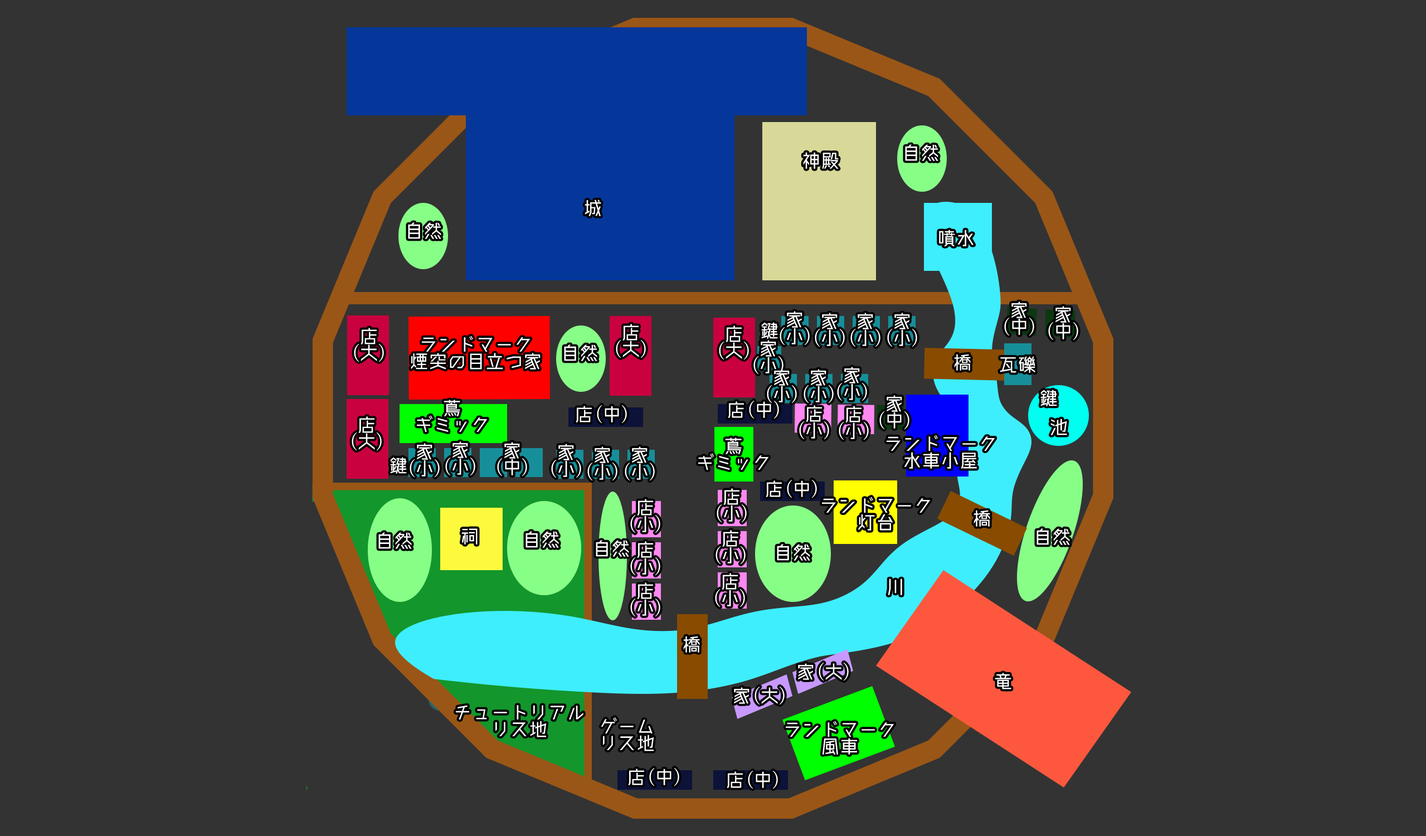
<style>
.page{position:relative;width:1426px;height:836px;background:#333333}
.page>*{position:absolute;margin:0}
.t1{font:19px "Makinas-4-Flat";color:#ffffff}
.t2{font:19px/16.7px "Makinas-4-Flat";color:#ffffff}
</style>
<div class="page">
<p class="t1" style="left:905px;top:144px;width:34px;height:17px">自然</p>
<p class="t1" style="left:803px;top:152px;width:36px;height:17px">神殿</p>
<p class="t1" style="left:585px;top:200px;width:16px;height:16px">城</p>
<p class="t1" style="left:408px;top:222px;width:33px;height:17px">自然</p>
<p class="t1" style="left:939px;top:230px;width:35px;height:16px">噴水</p>
<p class="t2" style="left:1004px;top:302px;width:30px;height:34px;text-align:center">家<br>(中)</p>
<p class="t2" style="left:1048px;top:306px;width:30px;height:35px;text-align:center">家<br>(中)</p>
<p class="t2" style="left:780px;top:311px;width:30px;height:35px;text-align:center">家<br>(小)</p>
<p class="t2" style="left:815px;top:313px;width:30px;height:34px;text-align:center">家<br>(小)</p>
<p class="t2" style="left:851px;top:313px;width:30px;height:34px;text-align:center">家<br>(小)</p>
<p class="t2" style="left:887px;top:313px;width:30px;height:34px;text-align:center">家<br>(小)</p>
<p class="t2" style="left:354px;top:328px;width:30px;height:34px;text-align:center">店<br>(大)</p>
<p class="t2" style="left:616px;top:324px;width:30px;height:34px;text-align:center">店<br>(大)</p>
<p class="t2" style="left:719px;top:325px;width:30px;height:35px;text-align:center">店<br>(大)</p>
<p class="t1" style="left:761px;top:322px;width:17px;height:17px">鍵</p>
<p class="t2" style="left:411px;top:336px;width:130px;height:34px;text-align:center">ランドマーク<br>煙突の目立つ家</p>
<p class="t2" style="left:754px;top:340px;width:30px;height:35px;text-align:center">家<br>(小)</p>
<p class="t1" style="left:564px;top:344px;width:33px;height:17px">自然</p>
<p class="t1" style="left:954px;top:354px;width:17px;height:17px">橋</p>
<p class="t1" style="left:1000px;top:356px;width:36px;height:17px">瓦礫</p>
<p class="t2" style="left:767px;top:369px;width:30px;height:35px;text-align:center">家<br>(小)</p>
<p class="t2" style="left:804px;top:369px;width:30px;height:35px;text-align:center">家<br>(小)</p>
<p class="t2" style="left:837px;top:367px;width:30px;height:34px;text-align:center">家<br>(小)</p>
<p class="t1" style="left:1041px;top:390px;width:16px;height:16px">鍵</p>
<p class="t2" style="left:417px;top:400px;width:71px;height:33px;text-align:center">蔦<br>ギミック</p>
<p class="t1" style="left:728px;top:400px;width:51px;height:19px">店(中)</p>
<p class="t2" style="left:880px;top:395px;width:30px;height:35px;text-align:center">家<br>(中)</p>
<p class="t1" style="left:576px;top:405px;width:51px;height:19px">店(中)</p>
<p class="t2" style="left:799px;top:405px;width:30px;height:35px;text-align:center">店<br>(小)</p>
<p class="t2" style="left:839px;top:406px;width:30px;height:34px;text-align:center">店<br>(小)</p>
<p class="t2" style="left:352px;top:416px;width:30px;height:35px;text-align:center">店<br>(大)</p>
<p class="t1" style="left:1051px;top:419px;width:16px;height:16px">池</p>
<p class="t2" style="left:698px;top:438px;width:71px;height:32px;text-align:center">蔦<br>ギミック</p>
<p class="t2" style="left:887px;top:435px;width:108px;height:34px;text-align:center">ランドマーク<br>水車小屋</p>
<p class="t2" style="left:410px;top:443px;width:30px;height:35px;text-align:center">家<br>(小)</p>
<p class="t2" style="left:445px;top:441px;width:30px;height:35px;text-align:center">家<br>(小)</p>
<p class="t2" style="left:497px;top:442px;width:30px;height:35px;text-align:center">家<br>(中)</p>
<p class="t2" style="left:551px;top:444px;width:30px;height:34px;text-align:center">家<br>(小)</p>
<p class="t2" style="left:587px;top:446px;width:31px;height:35px;text-align:center">家<br>(小)</p>
<p class="t2" style="left:625px;top:446px;width:30px;height:35px;text-align:center">家<br>(小)</p>
<p class="t1" style="left:390px;top:457px;width:17px;height:17px">鍵</p>
<p class="t1" style="left:766px;top:479px;width:51px;height:19px">店(中)</p>
<p class="t2" style="left:717px;top:488px;width:30px;height:35px;text-align:center">店<br>(小)</p>
<p class="t2" style="left:822px;top:497px;width:109px;height:34px;text-align:center">ランドマーク<br>灯台</p>
<p class="t2" style="left:630px;top:499px;width:30px;height:34px;text-align:center">店<br>(小)</p>
<p class="t1" style="left:974px;top:510px;width:16px;height:17px">橋</p>
<p class="t1" style="left:378px;top:532px;width:34px;height:17px">自然</p>
<p class="t1" style="left:461px;top:528px;width:17px;height:17px">祠</p>
<p class="t1" style="left:526px;top:531px;width:33px;height:17px">自然</p>
<p class="t2" style="left:716px;top:530px;width:30px;height:35px;text-align:center">店<br>(小)</p>
<p class="t1" style="left:1037px;top:528px;width:33px;height:17px">自然</p>
<p class="t1" style="left:596px;top:540px;width:33px;height:17px">自然</p>
<p class="t2" style="left:630px;top:541px;width:30px;height:35px;text-align:center">店<br>(小)</p>
<p class="t1" style="left:777px;top:544px;width:33px;height:17px">自然</p>
<p class="t2" style="left:715px;top:573px;width:30px;height:35px;text-align:center">店<br>(小)</p>
<p class="t1" style="left:888px;top:579px;width:14px;height:16px">川</p>
<p class="t2" style="left:630px;top:582px;width:30px;height:35px;text-align:center">店<br>(小)</p>
<p class="t1" style="left:683px;top:636px;width:17px;height:17px">橋</p>
<p class="t1" style="left:798px;top:662px;width:51px;height:19px">家(大)</p>
<p class="t1" style="left:995px;top:673px;width:17px;height:16px">竜</p>
<p class="t1" style="left:734px;top:686px;width:51px;height:19px">家(大)</p>
<p class="t2" style="left:456px;top:705px;width:128px;height:32px;text-align:center">チュートリアル<br>リス地</p>
<p class="t2" style="left:601px;top:717px;width:53px;height:34px;text-align:center">ゲーム<br>リス地</p>
<p class="t2" style="left:786px;top:721px;width:109px;height:34px;text-align:center">ランドマーク<br>風車</p>
<p class="t1" style="left:628px;top:767px;width:51px;height:19px">店(中)</p>
<p class="t1" style="left:727px;top:770px;width:51px;height:19px">店(中)</p>
</div>
